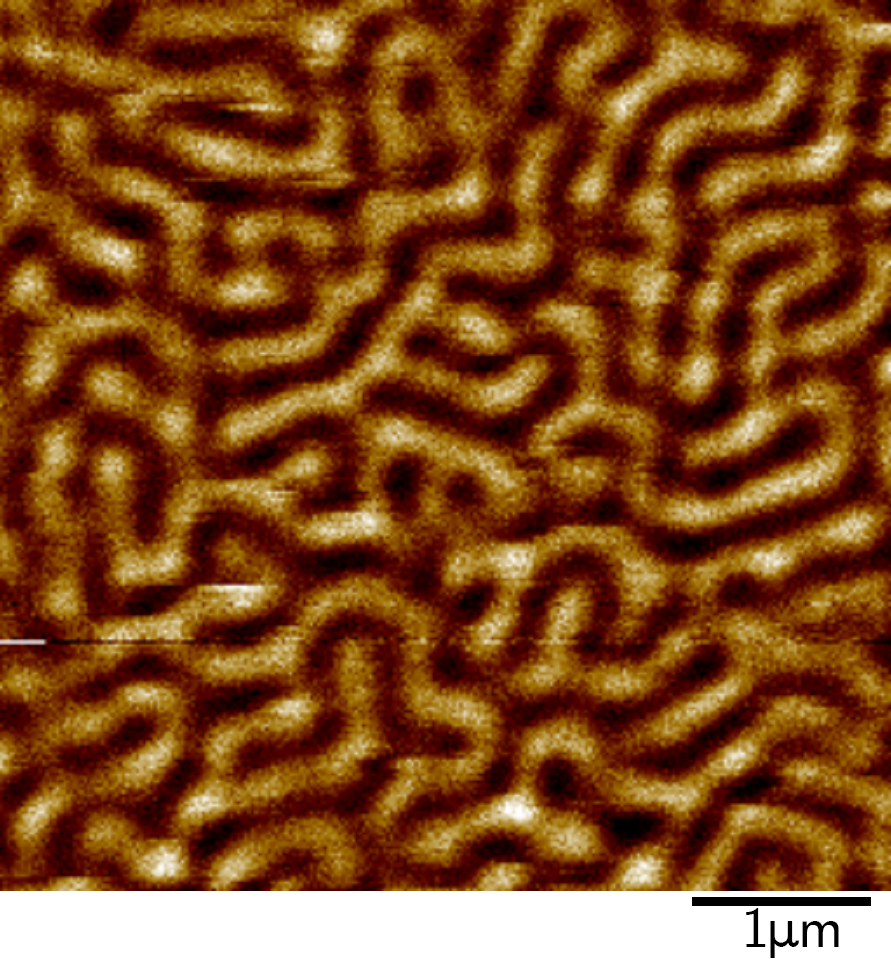
<style>
.page{position:relative;width:891px;height:959px}
.page>*{position:absolute;margin:0}
.t1{font:56.9px "CMUSansSerif";letter-spacing:-0.025em;color:#000000}
</style>
<div class="page">
<p class="t1" style="left:746px;top:908px;width:93px;height:50px">1μm</p>
</div>
